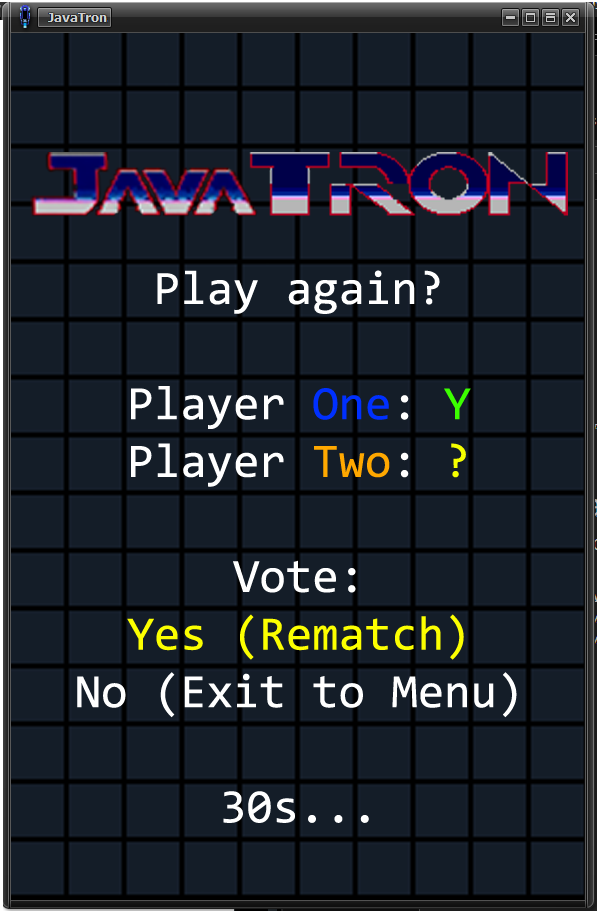
<style>
.page{position:relative;width:600px;height:919px;background:#141d28}
.page>*{position:absolute;margin:0}
.t1{font:48px "Consolas";color:#ffffff}
.t2{font:48px "Consolas";color:#0030ff}
.t3{font:48px "Consolas";color:#3cff00}
.t4{font:48px "Consolas";color:#ffa800}
.t5{font:48px "Consolas";color:#f6ff00}
.t6{font:48px "Consolas";color:#fcff00}
</style>
<div class="page">
<p class="t1" style="left:77px;top:270px;width:440px;height:553px;text-align:center">Play again?<br><br>Player <span class="t2">One</span>: <span class="t3">Y<br></span>Player <span class="t4">Two</span>: <span class="t5">?<br></span><br>Vote:<br><span class="t6">Yes (Rematch)<br></span>No (Exit to Menu)<br><br>30s...</p>
</div>
